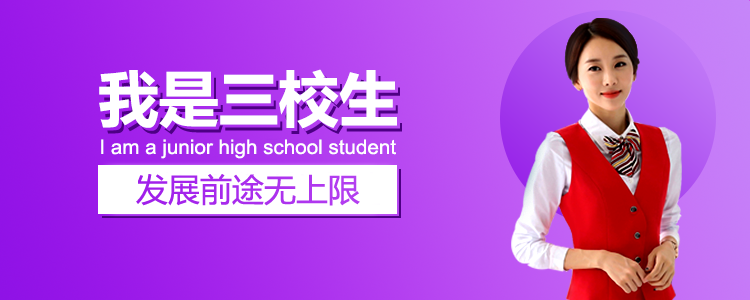
<style>
.page{position:relative;width:750px;height:300px}
.page>*{position:absolute;margin:0}
.t1{font:60px "MicrosoftYaHei-Bold";color:#ffffff}
.t2{font:20px "ArialMT";color:#ffffff;scale:1.03 1}
</style>
<div class="page">
<p class="t1" style="left:99px;top:69px;width:298px;height:60px">我是三校生</p>
<p class="t2" style="left:101px;top:139px;width:295px;height:20px">I am a junior high school student</p>
</div>
